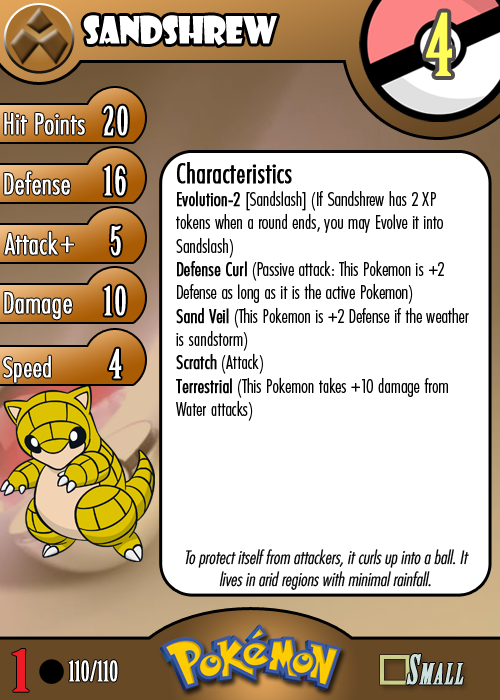
<style>
.page{position:relative;width:500px;height:700px;background:#ffffff}
.page>*{position:absolute;margin:0}
.t1{font:36.7px "ShowcardGothic-Reg";letter-spacing:-0.025em;color:#ffffff;scale:0.91 1}
.t2{font:83.3px "BirchStd";letter-spacing:0.025em;color:#fffd59;font-weight:bold}
.t3{font:27.8px "Futura-CondensedLight";color:#ffffff;font-weight:bold}
.t4{font:38.9px "BirchStd";letter-spacing:0.035em;color:#ffffff;font-weight:bold}
.t5{font:19.4px "FuturaCondensedBQ-Light";color:#010101}
.t6{font:27.8px "FuturaCondensedBQ-Light";color:#010101;font-weight:bold}
.t7{font:19.4px "FuturaCondensedBQ-Light";color:#010101;font-weight:bold}
.t8{font:30.6px "Futura-CondensedLight";color:#ffffff;font-weight:bold}
.t9{font:27.8px "FuturaCondensedBQ-Light";color:#ffffff;font-weight:bold}
.t10{font:18.1px "Futura-CondensedLight";color:#010101;font-style:italic}
.t11{font:55.6px "BirchStd";color:#ed1c24;font-weight:bold;scale:1.5 1}
.t12{font:27.8px "BirchStd";color:#ffffff;font-weight:bold}
</style>
<div class="page">
<p class="t1" style="left:83px;top:15px;width:194px;height:31px">sandshrew</p>
<p class="t2" style="left:426px;top:12px;width:26px;height:64px">4</p>
<p class="t3" style="left:4px;top:113px;width:81px;height:22px">Hit Points</p>
<p class="t4" style="left:103px;top:105px;width:25px;height:31px">20</p>
<p class="t3" style="left:4px;top:171px;width:66px;height:24px">Defense</p>
<p class="t4" style="left:104px;top:165px;width:22px;height:31px">16</p>
<p class="t5" style="left:176px;top:162px;width:293px;height:259px"><span class="t6">Characteristics<br></span><span class="t7">Evolution-2 </span>[Sandslash] (If Sandshrew has 2 XP tokens when a round ends, you may Evolve it into Sandslash)<br><span class="t7">Defense Curl</span> (Passive attack: This Pokemon is +2 Defense as long as it is the active Pokemon)<br><span class="t7">Sand Veil</span> (This Pokemon is +2 Defense if the weather is sandstorm)<br><span class="t7">Scratch</span> (Attack)<br><span class="t7">Terrestrial</span> (This Pokemon takes +10 damage from Water attacks)</p>
<p class="t3" style="left:4px;top:231px;width:54px;height:24px">Attack</p>
<p class="t4" style="left:111px;top:225px;width:10px;height:31px">5</p>
<p class="t8" style="left:60px;top:236px;width:14px;height:17px">+</p>
<p class="t3" style="left:4px;top:292px;width:68px;height:28px">Damage</p>
<p class="t4" style="left:104px;top:285px;width:22px;height:31px">10</p>
<p class="t4" style="left:109px;top:348px;width:13px;height:31px">4</p>
<p class="t9" style="left:3px;top:355px;width:48px;height:28px">Speed</p>
<p class="t10" style="left:185px;top:549px;width:284px;height:41px;text-align:center">To protect itself from attackers, it curls up into a ball. It lives in arid regions with minimal rainfall.</p>
<p class="t11" style="left:12px;top:649px;width:17px;height:43px">1</p>
<p class="t12" style="left:68px;top:660px;width:50px;height:22px">110/110</p>
</div>
